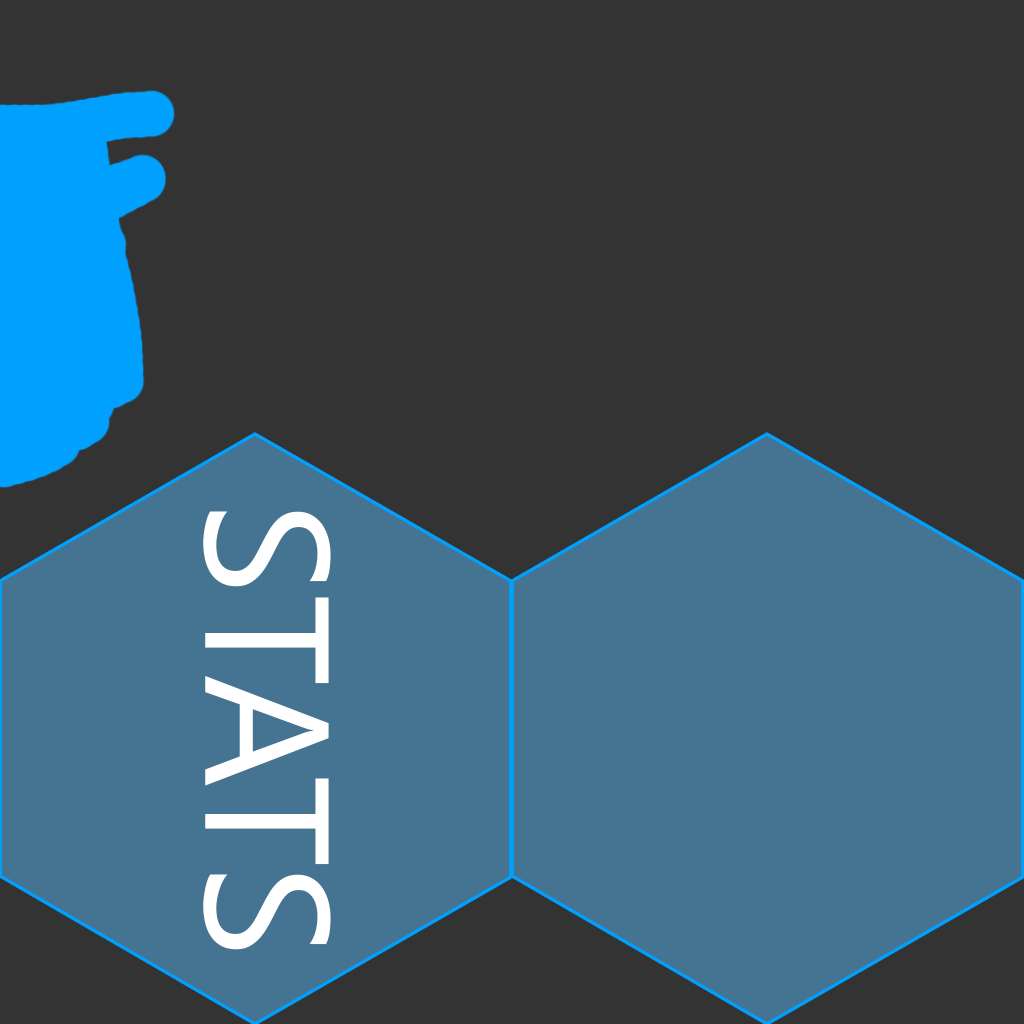
<style>
.page{position:relative;width:1024px;height:1024px;background:#333333}
.page>*{position:absolute;margin:0}
.t1{font:176px "SegoeUI";color:#ffffff}
</style>
<div class="page">
<p class="t1" style="left:203px;top:511px;width:128px;height:439px;rotate:90deg">STATS</p>
</div>
